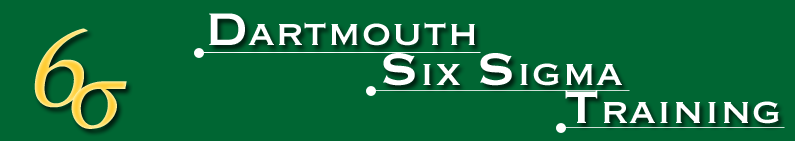
<style>
.page{position:relative;width:795px;height:141px;background:#006633}
.page>*{position:absolute;margin:0}
.t1{font:48px "Copperplate";color:#ffffff}
.t2{font:60px "Copperplate";color:#ffffff}
.t3{font:111.6px "Palatino-Roman";font-style:italic}
</style>
<div class="page">
<p class="t1" style="left:209px;top:13px;width:266px;height:33px"><span class="t2">D</span>artmouth</p>
<p class="t3" style="left:34px;top:28px;width:54px;height:80px">6</p>
<p class="t1" style="left:383px;top:53px;width:239px;height:33px"><span class="t2">S</span>ix <span class="t2">S</span>igma</p>
<p class="t1" style="left:565px;top:90px;width:214px;height:34px"><span class="t2">T</span>raining</p>
</div>
